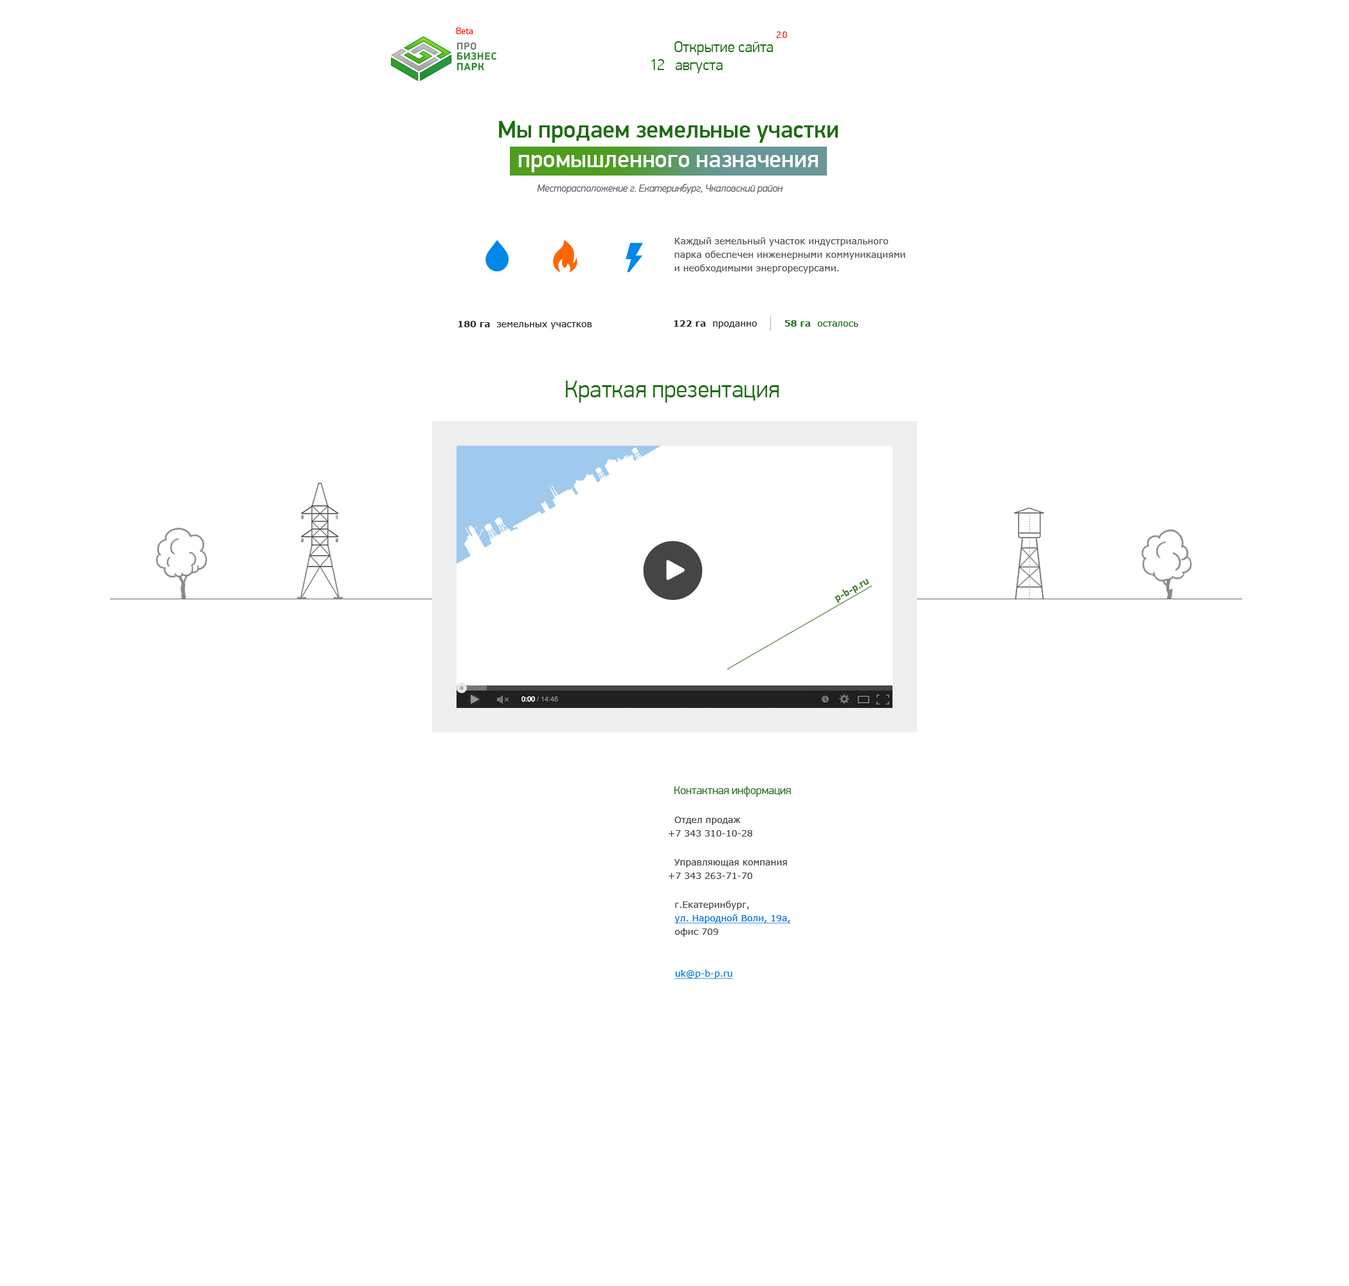
<style>
.page{position:relative;width:1349px;height:1286px;background:#ffffff}
.page>*{position:absolute;margin:0}
.t1{font:9px "PFDinDisplayPro-Light";color:#ff0000}
.t2{font:15.4px/18px "PFDinDisplayPro-Light";color:#1e6d14}
.t3{font:9px "PFDinDisplayPro-Light";color:#f40000}
.t4{font:10.3px "PFDinDisplayPro-LightItalic";color:#585858}
.t5{font:9px/13.5px "Verdana";color:#515151}
.t6{font:9px "Verdana";color:#2d2d2d}
.t7{font:9px "Verdana-Bold";color:#2d2d2d}
.t8{font:9px "Verdana";color:#1e6d14}
.t9{font:9px "Verdana-Bold";color:#1e6d14}
.t10{font:24.4px "PFDinDisplayPro-Light";color:#1e6d14}
.t11{font:11.6px "PFDinDisplayPro-Light";color:#1e6d14}
.t12{font:9px/13.5px "Verdana";color:#444444}
.t13{font:9px/15.4px "Verdana";color:#444444}
.t14{font:9px/13.5px "Verdana";color:#006ddd;text-decoration:underline}
.t15{font:9px/13.5px "Verdana";color:#5f5f5f}
.t16{font:9px/13.5px "Verdana";color:#434a52}
.t17{font:9px "Verdana";color:#0074e1;text-decoration:underline}
</style>
<div class="page">
<p class="t1" style="left:456px;top:28px;width:17px;height:6px">Beta</p>
<p class="t2" style="left:651px;top:41px;width:122px;height:32px">Открытие сайта<br>12   августа</p>
<p class="t3" style="left:776px;top:32px;width:11px;height:6px">2.0</p>
<p class="t4" style="left:537px;top:184px;width:246px;height:10px">Месторасположение г. Екатеринбург, Чкаловский район</p>
<p class="t5" style="left:674px;top:237px;width:231px;height:36px">Каждый земельный участок индустриального <br>парка обеспечен инженерными коммуникациями <br>и необходимыми энергоресурсами.</p>
<p class="t6" style="left:458px;top:321px;width:134px;height:8px"><span class="t7">180 га</span>  земельных участков</p>
<p class="t6" style="left:674px;top:320px;width:83px;height:8px"><span class="t7">122 га</span>  проданно</p>
<p class="t8" style="left:784px;top:320px;width:74px;height:7px"><span class="t9">58 га  </span>осталось</p>
<p class="t10" style="left:566px;top:381px;width:213px;height:21px">Краткая презентация</p>
<p class="t11" style="left:674px;top:786px;width:117px;height:11px">Контактная информация</p>
<p class="t12" style="left:669px;top:816px;width:118px;height:63px">Отдел продаж    <br>+7 343 310-10-28<br><br>  <span class="t13">Управляющая компания <br></span>+7 343 263-71-70</p>
<p class="t14" style="left:674px;top:901px;width:117px;height:36px"><span class="t15"><br></span><span class="t16">г.Екатеринбург,<br></span>ул. Народной Воли, 19а, <br><span class="t16">офис 709</span></p>
<p class="t17" style="left:674px;top:969px;width:59px;height:9px">uk@p-b-p.ru</p>
</div>
